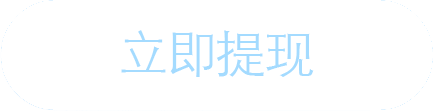
<style>
.page{position:relative;width:433px;height:111px;background:#ffffff}
.page>*{position:absolute;margin:0}
.t1{font:50.8px "STXihei";letter-spacing:-0.045em;color:#a3daff}
</style>
<div class="page">
<p class="t1" style="left:121px;top:30px;width:193px;height:47px">立即提现</p>
</div>
